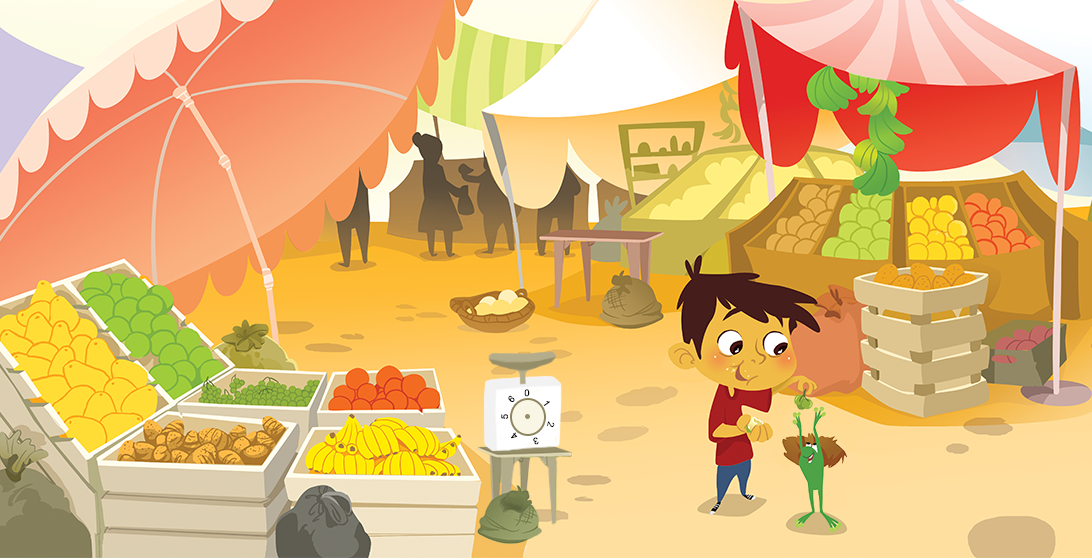
<style>
.page{position:relative;width:1092px;height:558px}
.page>*{position:absolute;margin:0}
.t1{font:9.2px "ArialMT";letter-spacing:0.072em;color:#000000;font-weight:bold}
</style>
<div class="page">
<p class="t1" style="left:501px;top:389px;width:54px;height:56px;rotate:158deg">0    1    2    3    4    5   6</p>
</div>
